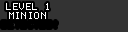
<style>
.page{position:relative;width:128px;height:32px;background:#333333}
.page>*{position:absolute;margin:0}
.t1{font:8px "Terminal";letter-spacing:0.05em;color:#ffffff}
</style>
<div class="page">
<p class="t1" style="left:6px;top:3px;width:43px;height:7px">LEVEL 1</p>
<p class="t1" style="left:9px;top:12px;width:37px;height:7px">MINION</p>
</div>
